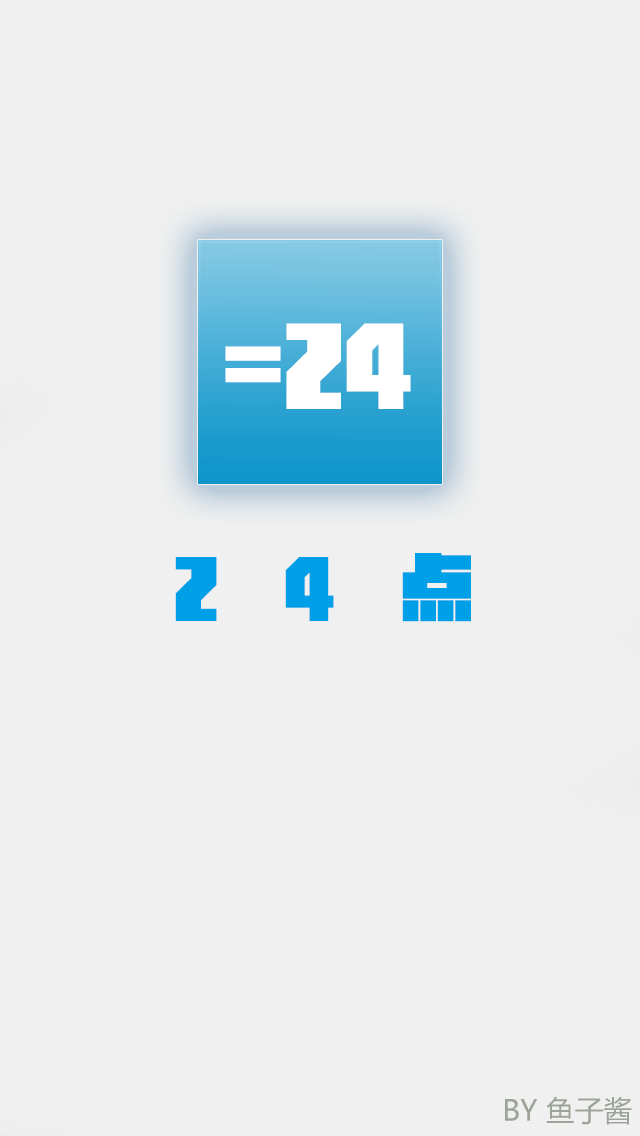
<style>
.page{position:relative;width:640px;height:1136px;background:#f0f0f0}
.page>*{position:absolute;margin:0}
.t1{font:72.1px "MFJinHei_Noncommercial-Regular";color:#00a0e9}
.t2{font:28.8px "MicrosoftYaHei";color:#9ca398}
</style>
<div class="page">
<p class="t1" style="left:175px;top:553px;width:296px;height:69px">2    4    点</p>
<p class="t2" style="left:505px;top:1096px;width:127px;height:29px">BY 鱼子酱</p>
</div>
